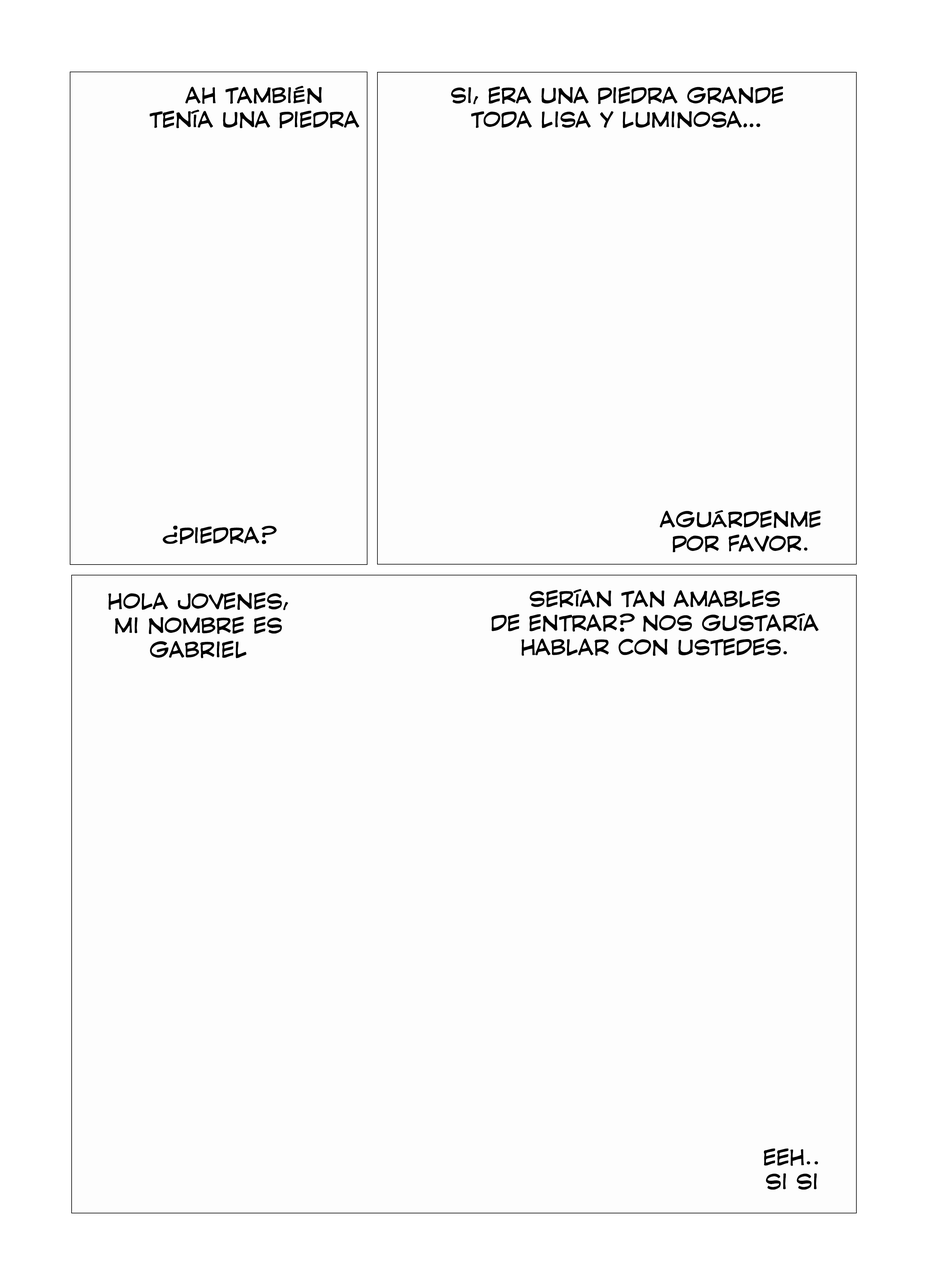
<style>
.page{position:relative;width:928px;height:1285px;background:#fdfdfd}
.page>*{position:absolute;margin:0}
.t1{font:20.1px "CCComicrazy-Roman";color:#000000}
</style>
<div class="page">
<p class="t1" style="left:150px;top:86px;width:209px;height:42px;text-align:center">AH TAMBIÉN <br>TENÍA UNA PIEDRA</p>
<p class="t1" style="left:451px;top:86px;width:332px;height:42px;text-align:center">SI, ERA UNA PIEDRA GRANDE TODA LISA Y LUMINOSA…</p>
<p class="t1" style="left:660px;top:510px;width:161px;height:42px;text-align:center">AGUÁRDENME POR FAVOR.</p>
<p class="t1" style="left:163px;top:526px;width:114px;height:18px">¿PIEDRA?</p>
<p class="t1" style="left:108px;top:592px;width:180px;height:66px;text-align:center">HOLA JOVENES, <br>MI NOMBRE ES GABRIEL</p>
<p class="t1" style="left:491px;top:589px;width:328px;height:67px;text-align:center">SERÍAN TAN AMABLES <br>DE ENTRAR? NOS GUSTARÍA HABLAR CON USTEDES.</p>
<p class="t1" style="left:764px;top:1148px;width:54px;height:42px;text-align:center">EEH.. SI SI</p>
</div>
